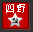
<style>
.page{position:relative;width:33px;height:32px;background:#c50000}
.page>*{position:absolute;margin:0}
.t1{font:10.4px "SimSun";color:#ffffff}
</style>
<div class="page">
<p class="t1" style="left:6px;top:4px;width:19px;height:9px">四野</p>
</div>
